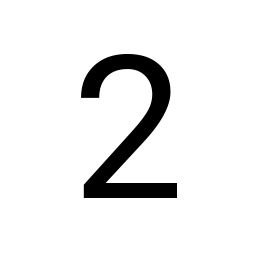
<style>
.page{position:relative;width:256px;height:256px;background:#ffffff}
.page>*{position:absolute;margin:0}
.t1{font:200px "Roboto-Regular";color:#000000}
</style>
<div class="page">
<p class="t1" style="left:81px;top:54px;width:96px;height:144px">2</p>
</div>
